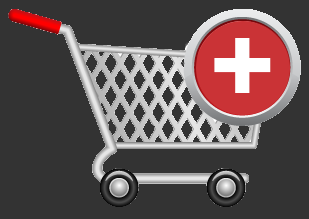
<style>
.page{position:relative;width:309px;height:219px;background:#333333}
.page>*{position:absolute;margin:0}
.t1{font:110.4px "ArialRoundedMTBold";color:#ffffff}
</style>
<div class="page">
<p class="t1" style="left:214px;top:38px;width:57px;height:55px">+</p>
</div>
